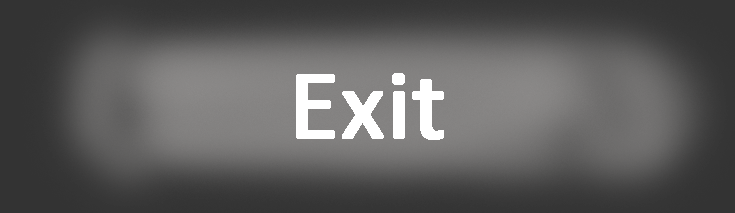
<style>
.page{position:relative;width:735px;height:213px}
.page>*{position:absolute;margin:0}
.t1{font:100px "Calibri";color:#ffffff;font-weight:bold}
</style>
<div class="page">
<p class="t1" style="left:296px;top:73px;width:148px;height:67px">Exit</p>
</div>
